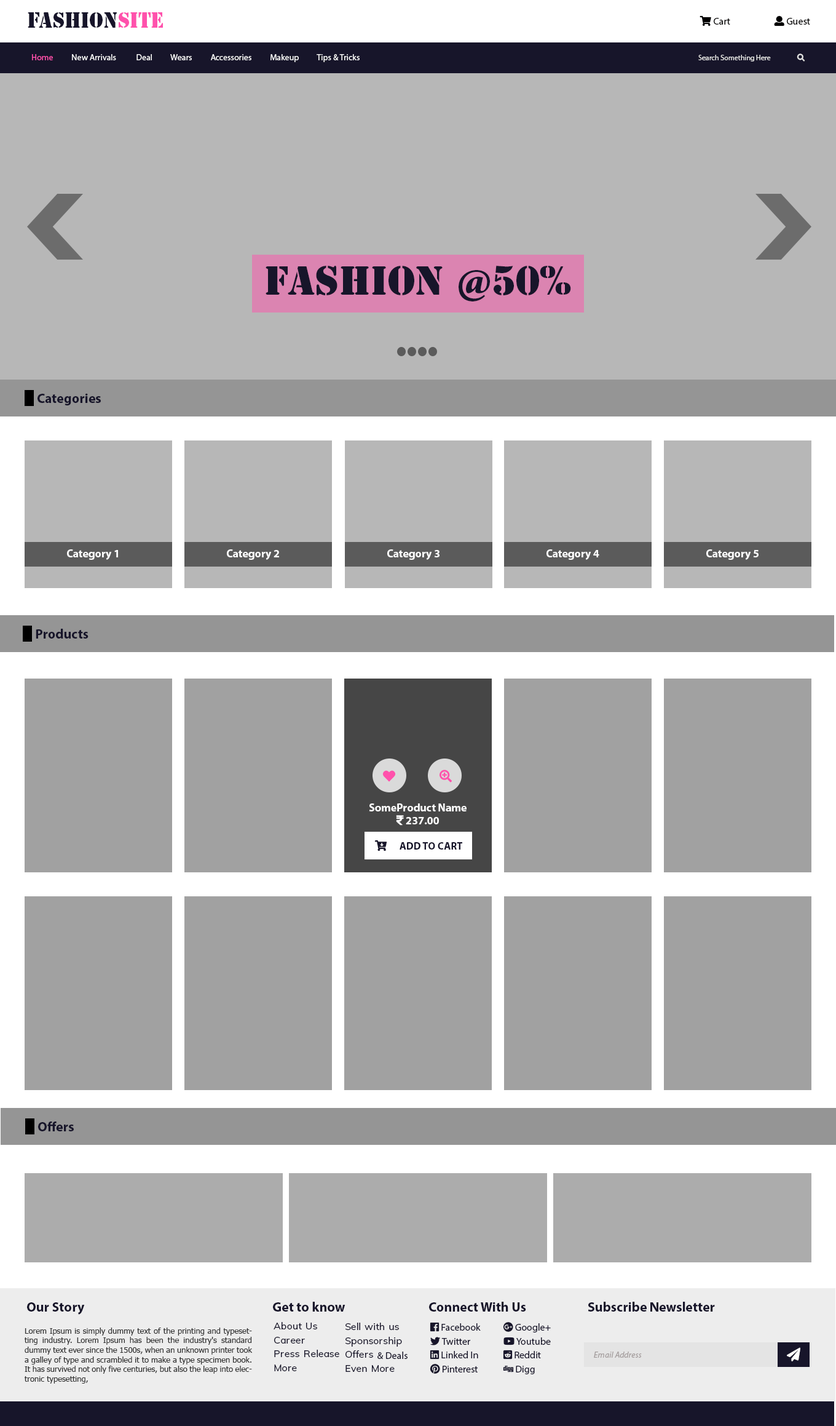
<style>
.page{position:relative;width:836px;height:1426px;background:#b7b7b7}
.page>*{position:absolute;margin:0}
.t1{font:20.3px "StencilStd";color:#17152a;scale:0.95 1}
.t2{font:20.3px "StencilStd";color:#ff51ac;scale:0.95 1}
.t3{font:8.6px "MyriadPro-Regular";color:#ffffff}
.t4{font:8.6px "MyriadPro-Regular";color:#ff51ac}
.t5{font:38.1px "StencilStd";color:#17152a}
.t6{font:13.5px "MyriadPro-Bold";color:#17152a}
.t7{font:11.1px "MyriadPro-Bold";color:#ffffff}
.t8{font:8px "Tahoma";color:#333333}
.t9{font:8.6px "MyriadPro-It";color:#a49d9d}
</style>
<div class="page">
<p class="t1" style="left:28px;top:12px;width:135px;height:16px">FaSHION<span class="t2">SITE</span></p>
<p class="t3" style="left:32px;top:54px;width:328px;height:8px"><span class="t4">Home</span>          New Arrivals           Deal          Wears          Accessories          Makeup          Tips &amp; Tricks</p>
<p class="t5" style="left:266px;top:266px;width:305px;height:35px">FaSHION @50%</p>
<p class="t6" style="left:38px;top:393px;width:63px;height:12px">Categories</p>
<p class="t7" style="left:67px;top:549px;width:51px;height:11px">Category 1</p>
<p class="t7" style="left:227px;top:549px;width:52px;height:11px">Category 2</p>
<p class="t7" style="left:387px;top:549px;width:53px;height:11px">Category 3</p>
<p class="t7" style="left:547px;top:549px;width:53px;height:11px">Category 4</p>
<p class="t7" style="left:707px;top:549px;width:52px;height:11px">Category 5</p>
<p class="t6" style="left:36px;top:629px;width:53px;height:9px">Products</p>
<p class="t7" style="left:369px;top:803px;width:98px;height:8px">SomeProduct Name</p>
<p class="t6" style="left:38px;top:1121px;width:36px;height:10px">Offers</p>
<p class="t6" style="left:273px;top:1301px;width:73px;height:10px">Get to know</p>
<p class="t6" style="left:429px;top:1301px;width:97px;height:10px">Connect With Us</p>
<p class="t6" style="left:588px;top:1301px;width:127px;height:10px">Subscribe Newsletter</p>
<p class="t6" style="left:27px;top:1302px;width:58px;height:12px">Our Story</p>
<p class="t8" style="left:25px;top:1327px;width:228px;height:56px;text-align:justify">Lorem Ipsum is simply dummy text of the printing and typesetting industry. Lorem Ipsum has been the industry's standard dummy text ever since the 1500s, when an unknown printer took a galley of type and scrambled it to make a type specimen book. It has survived not only five centuries, but also the leap into electronic typesetting,</p>
<p class="t9" style="left:594px;top:1351px;width:48px;height:6px">Email Address</p>
</div>
